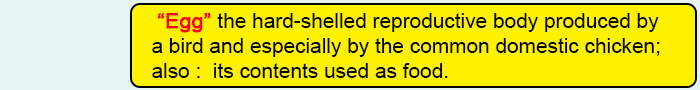
<style>
.page{position:relative;width:700px;height:90px;background:#fff200}
.page>*{position:absolute;margin:0}
.t1{font:20.8px "ArialMT";color:#020202}
.t2{font:20.8px "ArialMT";color:#fd010d}
.t3{font:20.8px "ArialMT";color:#fd010d;font-weight:bold}
</style>
<div class="page">
<p class="t1" style="left:152px;top:13px;width:508px;height:65px"><span class="t2"> </span><span class="t3">“Egg” </span>the hard-shelled reproductive body produced by <br>a bird and especially by the common domestic chicken; <br>also :  its contents used as food.</p>
</div>
